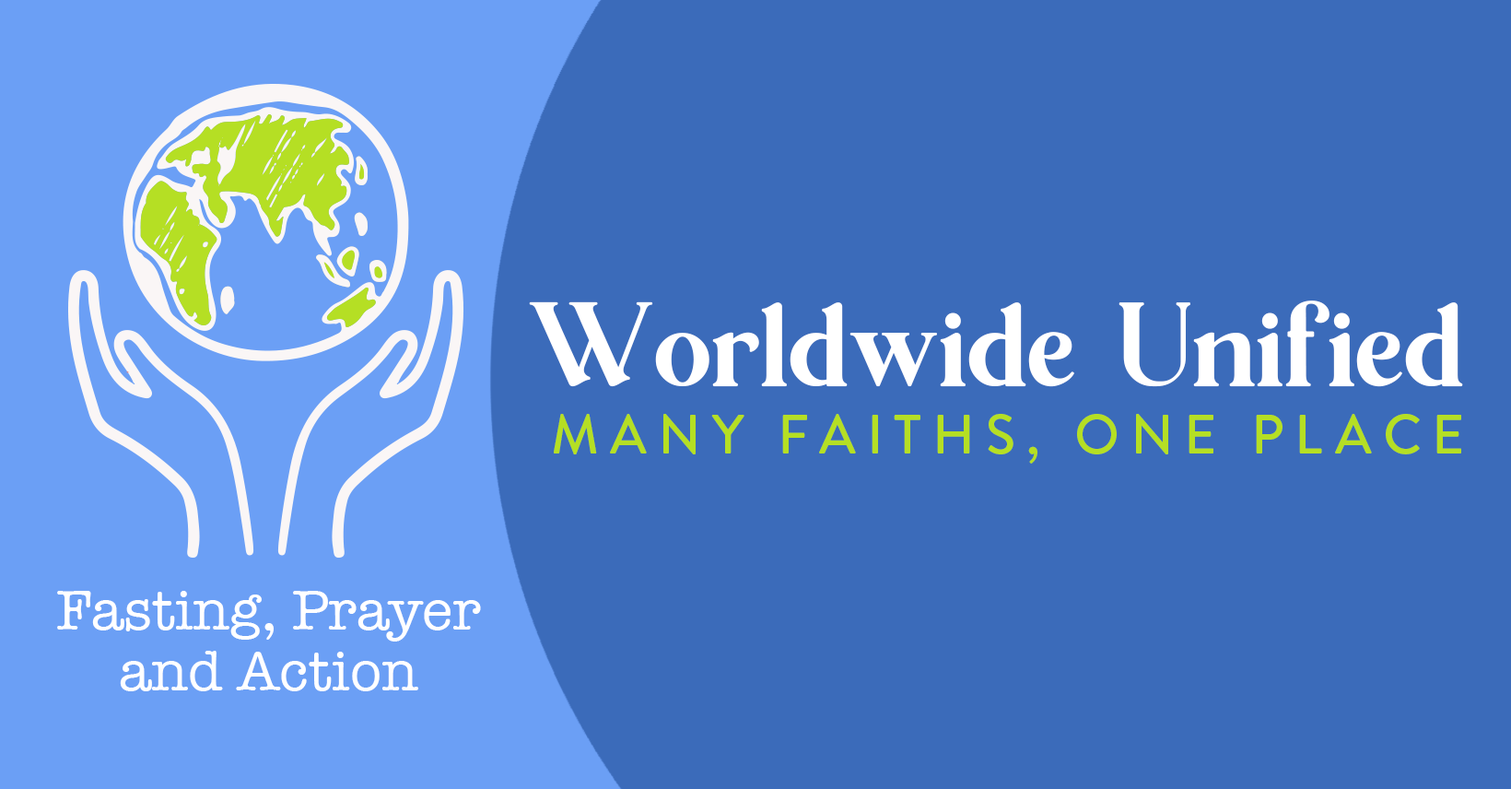
<style>
.page{position:relative;width:1511px;height:789px;background:#3b6bba}
.page>*{position:absolute;margin:0}
.t1{font:120px "LumieraRegular";color:#ffffff}
.t2{font:55.3px "BrandonGrotesque-Medium";letter-spacing:0.2em;color:#b5df24;text-transform:uppercase}
.t3{font:57.8px/60.3px "AmericanTypewriter";color:#ffffff}
</style>
<div class="page">
<p class="t1" style="left:529px;top:300px;width:935px;height:87px">Worldwide Unified</p>
<p class="t2" style="left:554px;top:414px;width:908px;height:50px">Many Faiths, One Place</p>
<p class="t3" style="left:57px;top:591px;width:424px;height:100px;text-align:center">Fasting, Prayer<br>and Action</p>
</div>
